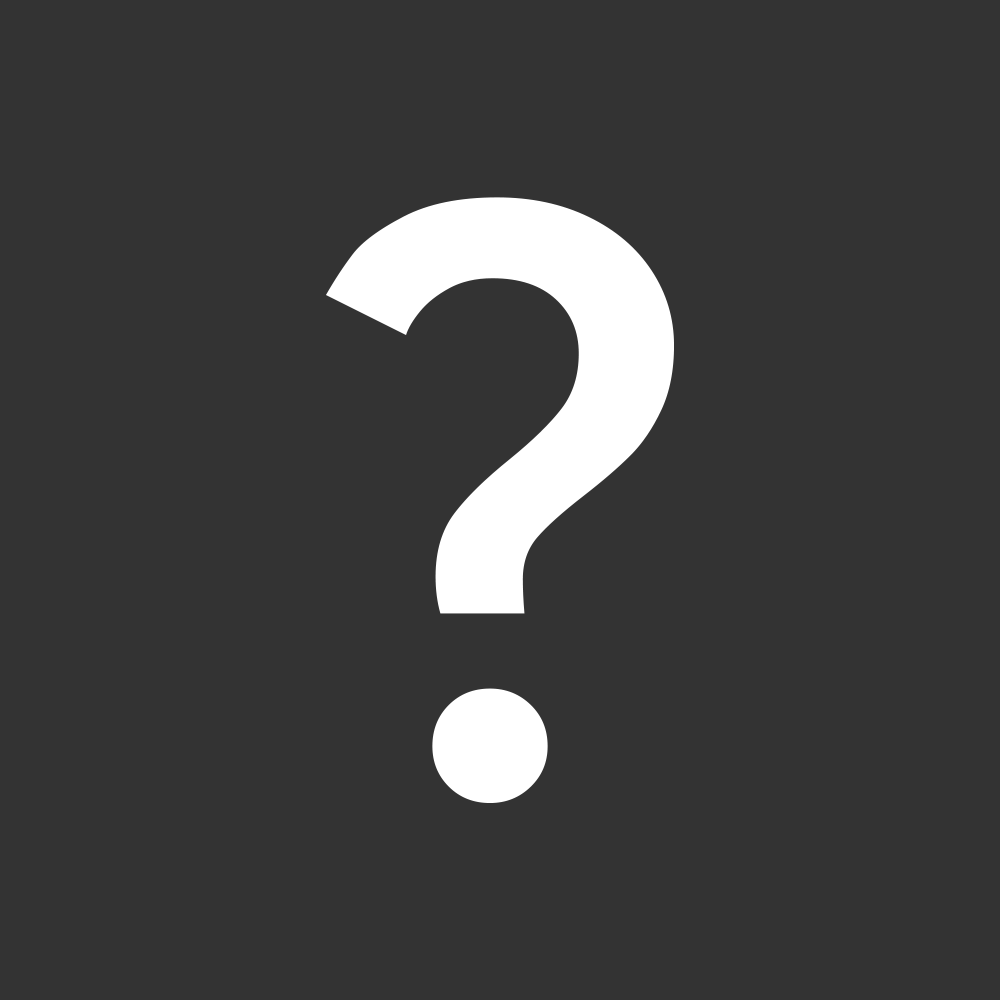
<style>
.page{position:relative;width:1000px;height:1000px;background:#333333}
.page>*{position:absolute;margin:0}
.t1{font:800px "Alata-Regular";color:#ffffff}
</style>
<div class="page">
<p class="t1" style="left:326px;top:197px;width:348px;height:606px">?</p>
</div>
